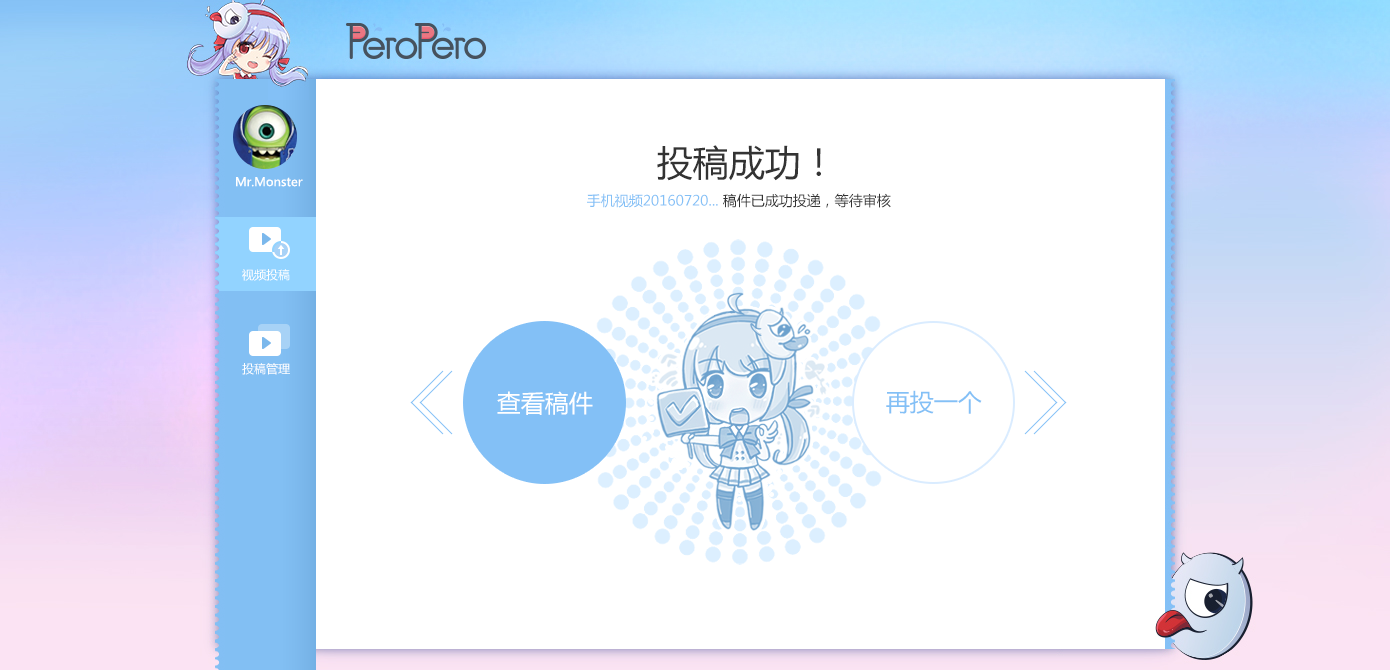
<style>
.page{position:relative;width:1390px;height:670px;background:#ffffff}
.page>*{position:absolute;margin:0}
.t1{font:36px "MicrosoftYaHei";color:#333333}
.t2{font:14px "MicrosoftYaHei";color:#83c0f6}
.t3{font:14px "MicrosoftYaHei";color:#333333}
.t4{font:24px "MicrosoftYaHei";color:#83c0f6}
.t5{font:24px "MicrosoftYaHei";color:#ffffff}
</style>
<div class="page">
<p class="t1" style="left:657px;top:145px;width:164px;height:36px">投稿成功！</p>
<p class="t2" style="left:587px;top:193px;width:304px;height:15px">手机视频20160720... <span class="t3">稿件已成功投递，等待审核</span></p>
<p class="t4" style="left:886px;top:390px;width:96px;height:24px">再投一个</p>
<p class="t5" style="left:497px;top:391px;width:96px;height:24px">查看稿件</p>
</div>
